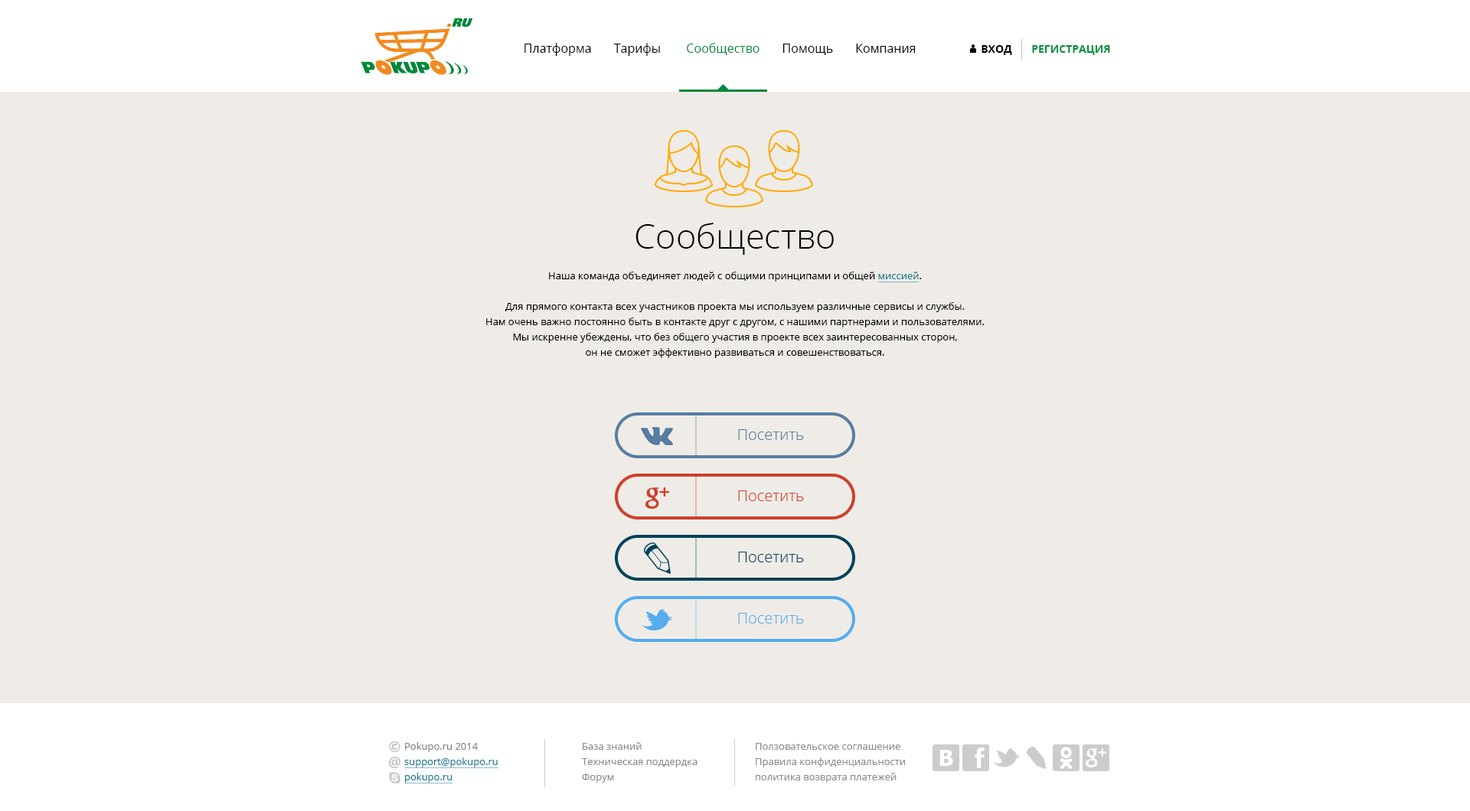
<style>
.page{position:relative;width:1470px;height:811px;background:#efece7}
.page>*{position:absolute;margin:0}
.t1{font:12.2px "OpenSans";color:#010101}
.t2{font:12.2px "OpenSans";color:#00883c}
.t3{font:10.7px "OpenSans-Bold";color:#02903d;text-transform:uppercase}
.t4{font:10.7px "OpenSans-Bold";color:#000000;text-transform:uppercase}
.t5{font:10px/15.3px "OpenSans";color:#000000}
.t6{font:34.4px/15.3px "OpenSans-Light";color:#000000}
.t7{font:10px/15.3px "OpenSans";color:#177a93}
.t8{font:10px/15.3px "OpenSans";color:#83827f}
.t9{font:10px/15.3px "OpenSans";color:#8d8d8d}
</style>
<div class="page">
<p class="t1" style="left:524px;top:43px;width:391px;height:13px">Платформа       Тарифы        <span class="t2">Сообщество</span>       Помощь       Компания</p>
<p class="t3" style="left:981px;top:45px;width:129px;height:10px"><span class="t4">Вход       </span>регистрация</p>
<p class="t5" style="left:486px;top:223px;width:498px;height:135px;text-align:center"><span class="t6">Сообщество<br><br></span>Наша команда объединяет людей с общими принципами и общей <span class="t7">миссией</span>.<br><br>Для прямого контакта всех участников проекта мы используем различные сервисы и службы.<br>Нам очень важно постоянно быть в контакте друг с другом, с нашими партнерами и пользователями.<br>Мы искренне убеждены, что без общего участия в проекте всех заинтересованных сторон,<br>он не сможет эффективно развиваться и совешенствоваться.</p>
<p class="t7" style="left:404px;top:742px;width:94px;height:41px"><span class="t8"><br>Pokupo.ru 2014<br></span>support@pokupo.ru<br>pokupo.ru</p>
<p class="t9" style="left:582px;top:742px;width:115px;height:41px">База знаний<br>Техническая поддердка<br>Форум</p>
<p class="t9" style="left:755px;top:743px;width:150px;height:40px">Ползовательское соглашение<br>Правила конфиденциальности<br>политика возврата платежей</p>
</div>
